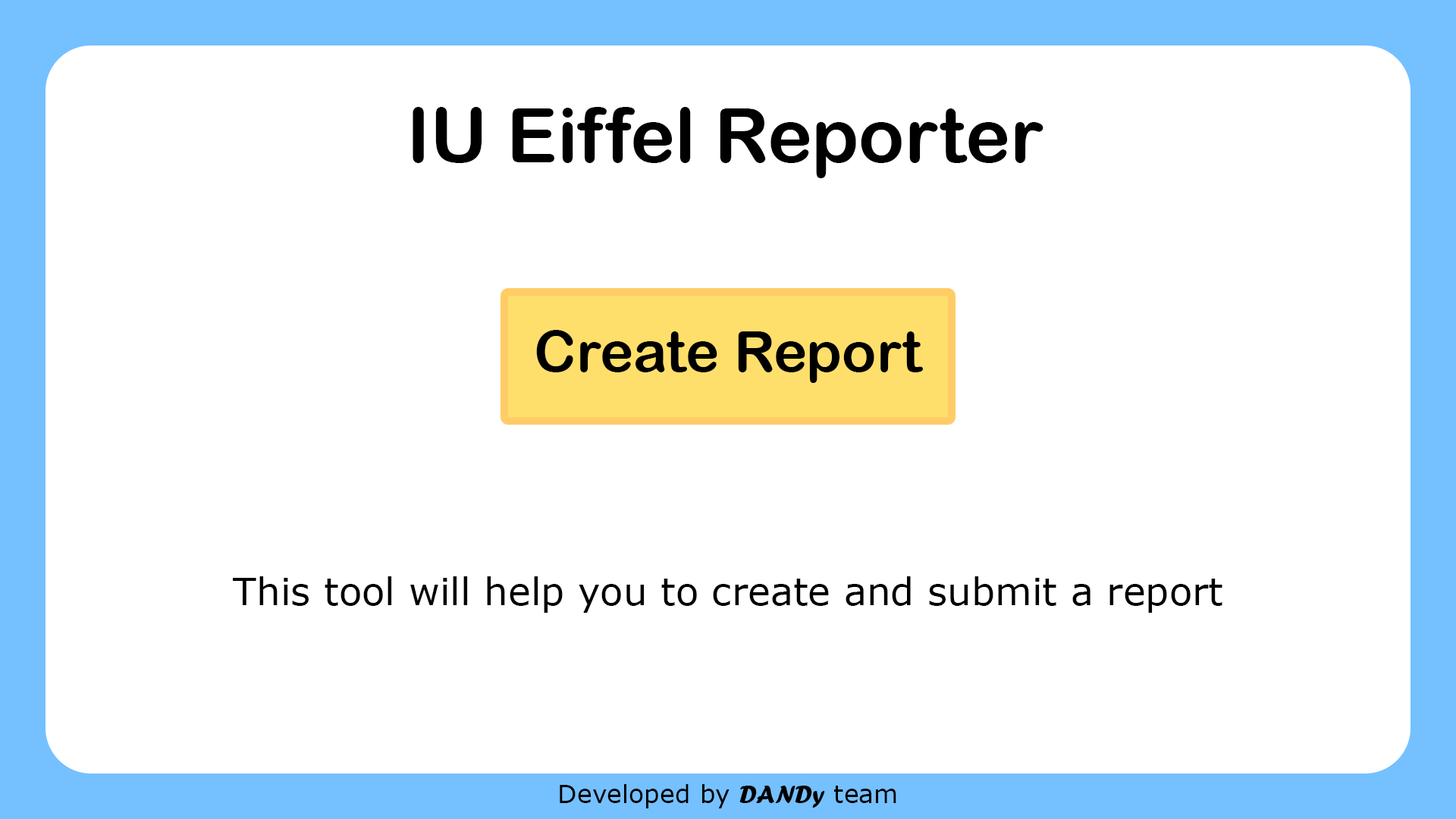
<style>
.page{position:relative;width:1456px;height:819px;background:#ffffff}
.page>*{position:absolute;margin:0}
.t1{font:75.8px "ArialRoundedMTBold";color:#000000}
.t2{font:56.9px "ArialRoundedMTBold";color:#000000}
.t3{font:37.9px "Verdana";color:#000000}
.t4{font:25.3px "Verdana";color:#000000}
.t5{font:25.3px "ForteMT";color:#000000}
</style>
<div class="page">
<p class="t1" style="left:413px;top:107px;width:630px;height:71px">IU Eiffel Reporter</p>
<p class="t2" style="left:536px;top:330px;width:387px;height:53px">Create Report</p>
<p class="t3" style="left:233px;top:576px;width:989px;height:37px">This tool will help you to create and submit a report</p>
<p class="t4" style="left:560px;top:784px;width:336px;height:24px">Developed by <span class="t5">DANDy</span> team</p>
</div>
